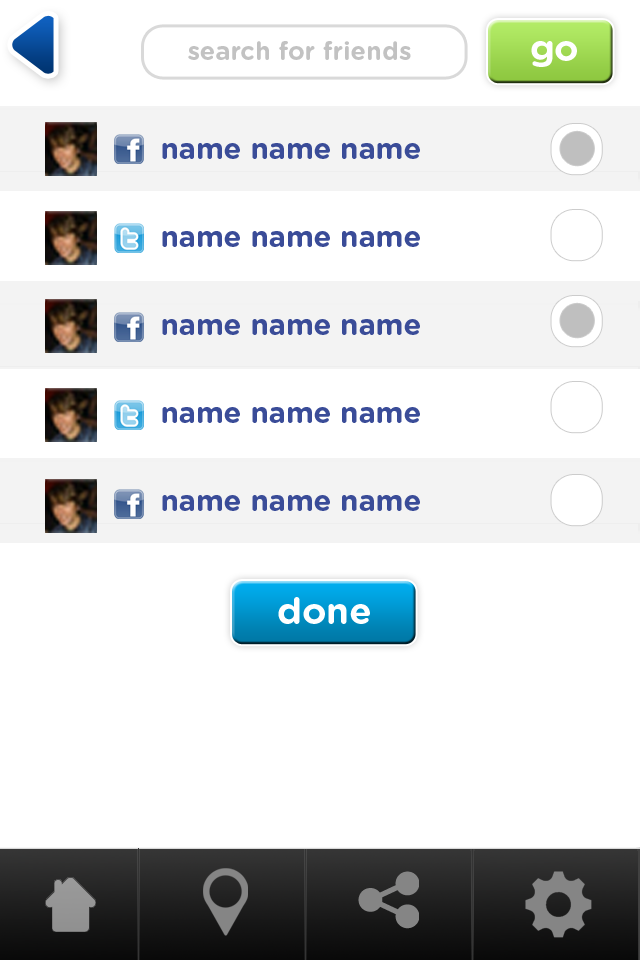
<style>
.page{position:relative;width:640px;height:960px;background:#ffffff}
.page>*{position:absolute;margin:0}
.t1{font:25.3px "GothamRounded-Bold";color:#c2c2c2}
.t2{font:36.9px "GothamRounded-Bold";color:#ffffff}
.t3{font:29.2px/88px "GothamRounded-Bold";color:#3a4c98}
</style>
<div class="page">
<p class="t1" style="left:188px;top:41px;width:223px;height:19px">search for friends</p>
<p class="t2" style="left:531px;top:41px;width:46px;height:26px">go</p>
<p class="t3" style="left:162px;top:143px;width:258px;height:368px">name name name      <br>name name name     <br>name name name     <br>name name name   <br>name name name</p>
<p class="t2" style="left:278px;top:597px;width:92px;height:27px">done</p>
</div>
